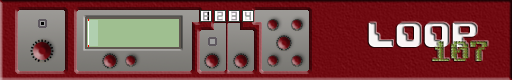
<style>
.page{position:relative;width:512px;height:80px}
.page>*{position:absolute;margin:0}
.t1{font:28.8px "Razor1911";color:#f8f4f4}
.t2{font:28.8px "TriadXS"}
</style>
<div class="page">
<p class="t1" style="left:368px;top:22px;width:109px;height:25px">LOOP</p>
<p class="t2" style="left:432px;top:41px;width:56px;height:20px">107</p>
</div>
